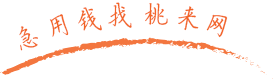
<style>
.page{position:relative;width:274px;height:80px;background:#ffffff}
.page>*{position:absolute;margin:0}
.t1{font:26.4px "FZYBKSJW--GB1-0";letter-spacing:0.13em;color:#f26527;scale:0.91 1}
</style>
<div class="page">
<p class="t1" style="left:108px;top:2px;width:24px;height:26px">找</p>
<p class="t1" style="left:145px;top:3px;width:23px;height:22px">桃</p>
<p class="t1" style="left:178px;top:6px;width:21px;height:25px;rotate:12deg">来</p>
<p class="t1" style="left:49px;top:14px;width:20px;height:23px;rotate:-14deg">用</p>
<p class="t1" style="left:78px;top:7px;width:24px;height:24px;rotate:-11deg">钱</p>
<p class="t1" style="left:206px;top:14px;width:22px;height:24px;rotate:21deg">网</p>
<p class="t1" style="left:19px;top:26px;width:19px;height:25px;rotate:-13deg">急</p>
</div>
